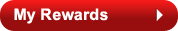
<style>
.page{position:relative;width:178px;height:31px;background:#980e0e}
.page>*{position:absolute;margin:0}
.t1{font:16px "Arial-BoldMT";letter-spacing:0.014em;color:#ffffff}
</style>
<div class="page">
<p class="t1" style="left:14px;top:8px;width:94px;height:16px">My Rewards</p>
</div>
